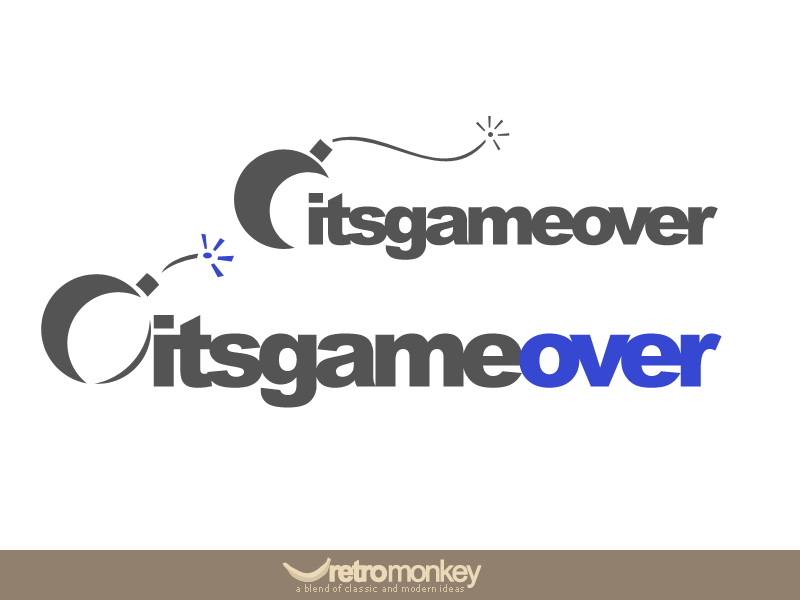
<style>
.page{position:relative;width:800px;height:600px;background:#ffffff}
.page>*{position:absolute;margin:0}
.t1{font:72px "Arial-Black";letter-spacing:-0.1em;color:#545454}
.t2{font:100px "Arial-Black";letter-spacing:-0.1em;color:#545454}
.t3{font:100px "Arial-Black";letter-spacing:-0.1em;color:#3648d1}
</style>
<div class="page">
<p class="t1" style="left:308px;top:193px;width:410px;height:67px">itsgameover</p>
<p class="t2" style="left:153px;top:315px;width:569px;height:93px">itsgame<span class="t3">over</span></p>
</div>
